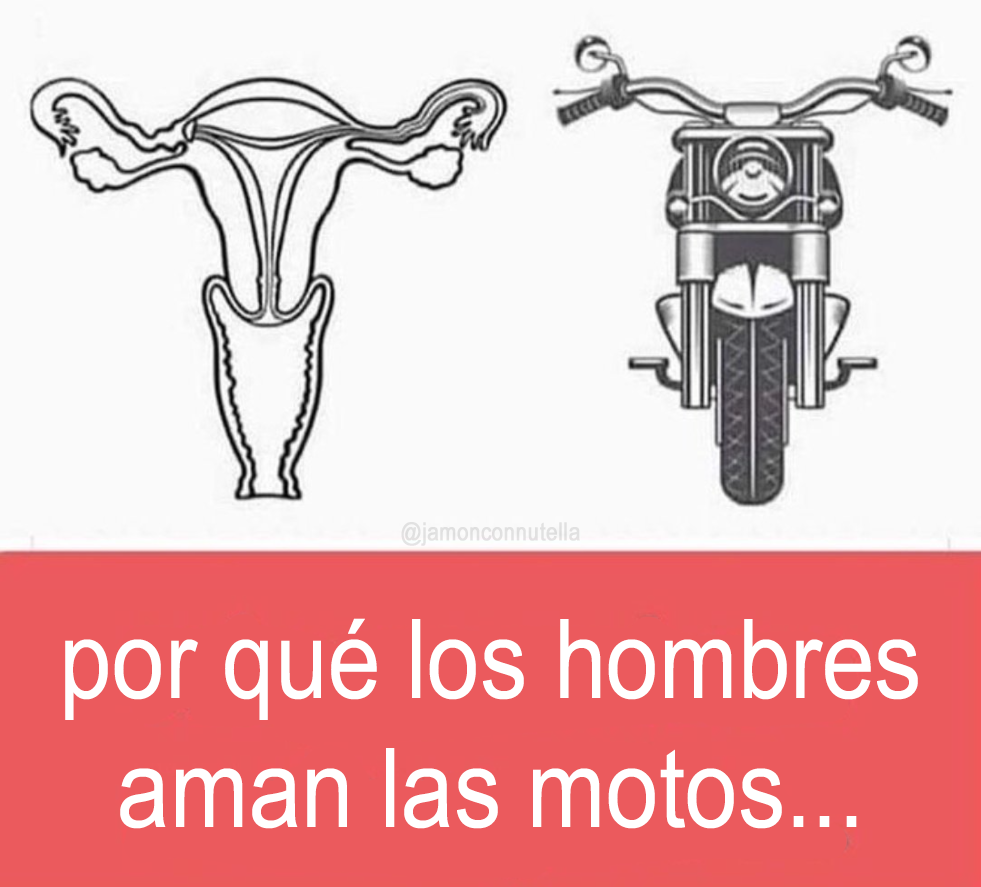
<style>
.page{position:relative;width:981px;height:887px;background:#fafafa}
.page>*{position:absolute;margin:0}
.t1{font:24.8px "ArialNarrow";color:#e1e1e1;font-weight:bold}
.t2{font:110.2px "ArialNarrow";color:#ffffff;scale:1.05 1}
</style>
<div class="page">
<p class="t1" style="left:401px;top:522px;width:179px;height:24px">@jamonconnutella</p>
<p class="t2" style="left:65px;top:618px;width:853px;height:211px;text-align:center">por qué los hombres<br>aman las motos...</p>
</div>
